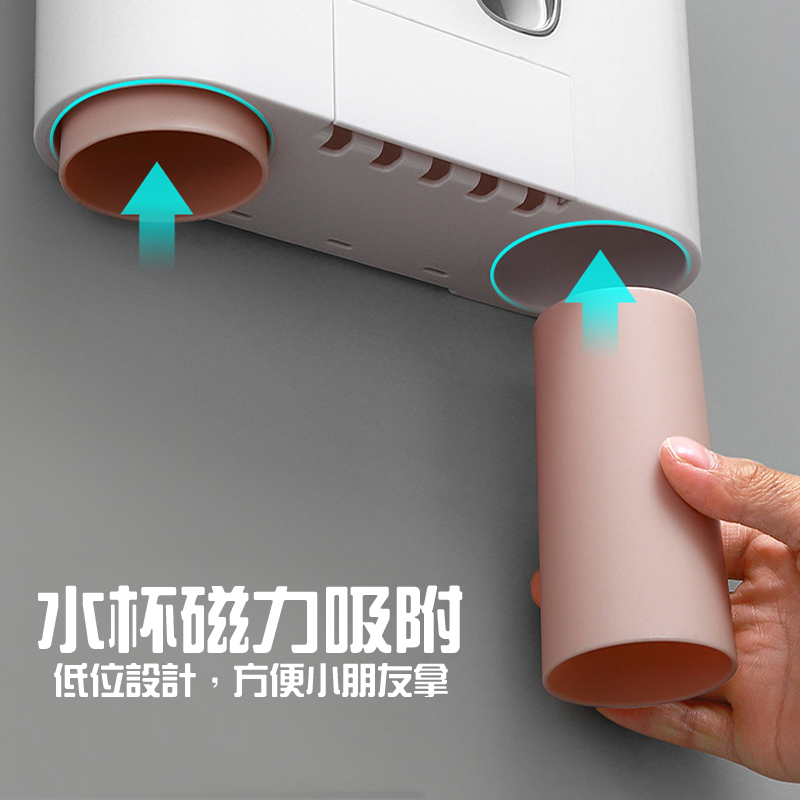
<style>
.page{position:relative;width:800px;height:800px}
.page>*{position:absolute;margin:0}
.t1{font:71.6px "HanWangZonYi";color:#ffffff}
.t2{font:36px "HanWangZonYi";color:#ffffff}
</style>
<div class="page">
<p class="t1" style="left:38px;top:585px;width:425px;height:68px">水杯磁力吸附</p>
<p class="t2" style="left:53px;top:663px;width:395px;height:35px">低位設計，方便小朋友拿</p>
</div>
